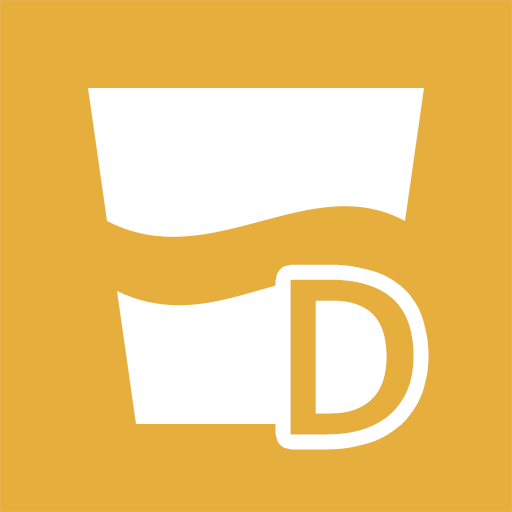
<style>
.page{position:relative;width:512px;height:512px;background:#e6ae3d}
.page>*{position:absolute;margin:0}
.t1{font:200px "NanumBarunGothicBold";color:#e6ae3d}
</style>
<div class="page">
<p class="t1" style="left:290px;top:279px;width:124px;height:156px">D</p>
</div>
